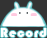
<style>
.page{position:relative;width:47px;height:38px;background:#333333}
.page>*{position:absolute;margin:0}
.t1{font:12.9px "Bauhaus93";letter-spacing:0.1em;color:#ffffff}
</style>
<div class="page">
<p class="t1" style="left:0px;top:28px;width:47px;height:9px">Record</p>
</div>
